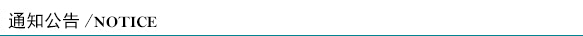
<style>
.page{position:relative;width:583px;height:36px;background:#ffffff}
.page>*{position:absolute;margin:0}
.t1{font:16px "BellMTBold";color:#000000}
.t2{font:18px "SimHei";color:#000000}
</style>
<div class="page">
<p class="t1" style="left:8px;top:12px;width:149px;height:17px"><span class="t2">通知公告/</span>NOTICE</p>
</div>
